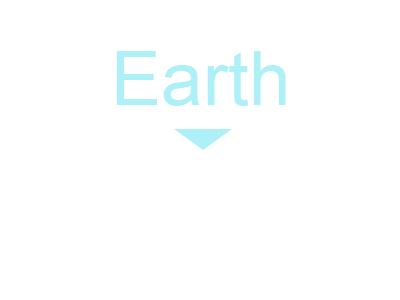
<style>
.page{position:relative;width:400px;height:300px;background:#ffffff}
.page>*{position:absolute;margin:0}
.t1{font:75px "ArialMT";color:#aef0f8}
</style>
<div class="page">
<p class="t1" style="left:116px;top:51px;width:170px;height:55px">Earth</p>
</div>
